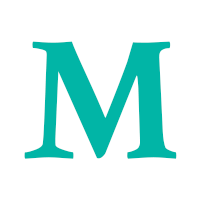
<style>
.page{position:relative;width:200px;height:200px;background:#ffffff}
.page>*{position:absolute;margin:0}
.t1{font:180.2px "CrimsonText-Bold";letter-spacing:0.05em;color:#01b5a6;text-transform:uppercase}
</style>
<div class="page">
<p class="t1" style="left:24px;top:41px;width:153px;height:118px">M</p>
</div>
